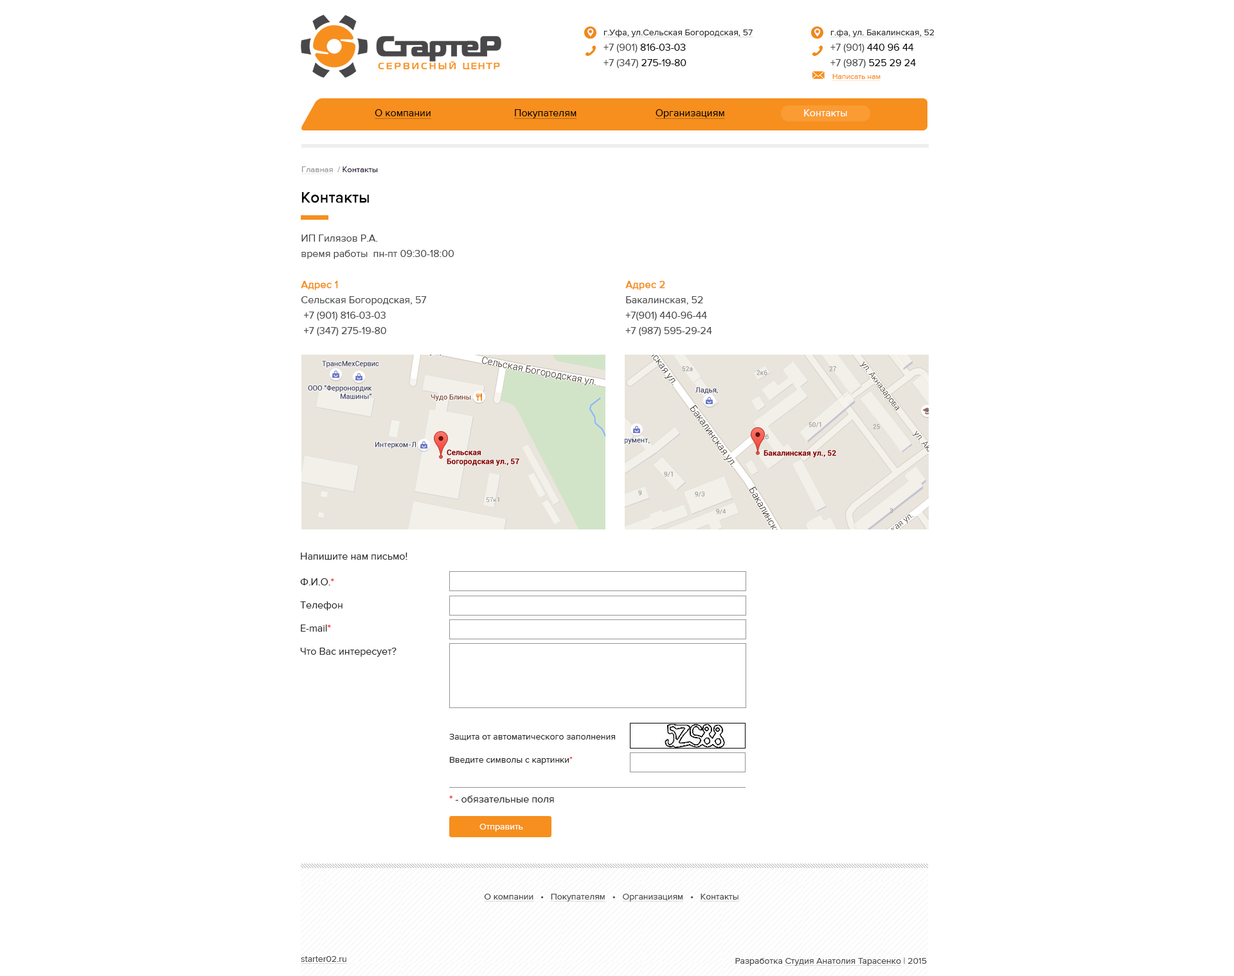
<style>
.page{position:relative;width:1234px;height:976px;background:#ffffff}
.page>*{position:absolute;margin:0}
.t1{font:9px/15.4px "amlgjlahnkgmkjoldgbpeifodofplkkf";color:#282828;text-decoration:underline}
.t2{font:10.3px/15.4px "amlgjlahnkgmkjoldgbpeifodofplkkf";color:#48484a}
.t3{font:10.3px/15.4px "amlgjlahnkgmkjoldgbpeifodofplkkf";color:#000000}
.t4{font:7.7px "amlgjlahnkgmkjoldgbpeifodofplkkf";color:#f68f1e;text-decoration:underline}
.t5{font:10.3px "amlgjlahnkgmkjoldgbpeifodofplkkf";color:#000000;text-decoration:underline}
.t6{font:10.3px "amlgjlahnkgmkjoldgbpeifodofplkkf";color:#ffffff}
.t7{font:8.4px "amlgjlahnkgmkjoldgbpeifodofplkkf";color:#2c1a37}
.t8{font:8.4px "amlgjlahnkgmkjoldgbpeifodofplkkf";color:#969696;text-decoration:underline}
.t9{font:8.4px "amlgjlahnkgmkjoldgbpeifodofplkkf";color:#969696}
.t10{font:15.4px "amlgjlahnkgmkjoldgbpeifodofplkkf";color:#010101;font-weight:bold}
.t11{font:10.3px/15.4px "amlgjlahnkgmkjoldgbpeifodofplkkf";color:#f68f1e;font-weight:bold}
.t12{font:10.3px "amlgjlahnkgmkjoldgbpeifodofplkkf";color:#282828}
.t13{font:10.3px/23.1px "amlgjlahnkgmkjoldgbpeifodofplkkf";color:#282828}
.t14{font:10.3px/23.1px "amlgjlahnkgmkjoldgbpeifodofplkkf";color:#ff0000}
.t15{font:9px/23.1px "amlgjlahnkgmkjoldgbpeifodofplkkf";color:#282828}
.t16{font:9px/23.1px "amlgjlahnkgmkjoldgbpeifodofplkkf";color:#fe0000}
.t17{font:10.3px "amlgjlahnkgmkjoldgbpeifodofplkkf";color:#ff0000}
.t18{font:9px "amlgjlahnkgmkjoldgbpeifodofplkkf";color:#ffffff}
.t19{font:9px "amlgjlahnkgmkjoldgbpeifodofplkkf";color:#48484a;text-decoration:underline}
.t20{font:9px "amlgjlahnkgmkjoldgbpeifodofplkkf";color:#48484a}
</style>
<div class="page">
<p class="t1" style="left:604px;top:30px;width:149px;height:38px">г.Уфа, ул.Сельская Богородская, 57<br><span class="t2">+7 (901)</span><span class="t3"> 816-03-03<br></span><span class="t2">+7 (347)</span><span class="t3"> 275-19-80</span></p>
<p class="t1" style="left:830px;top:30px;width:105px;height:38px">г.фа, ул. Бакалинская, 52<br><span class="t2">+7 (901)</span><span class="t3"> 440 96 44<br></span><span class="t2">+7 (987)</span><span class="t3"> 525 29 24</span></p>
<p class="t4" style="left:832px;top:74px;width:49px;height:7px">Написать нам</p>
<p class="t5" style="left:374px;top:109px;width:57px;height:10px">О компании</p>
<p class="t5" style="left:514px;top:109px;width:333px;height:10px">Покупателям      Организациям      <span class="t6">Контакты</span></p>
<p class="t7" style="left:301px;top:166px;width:77px;height:8px"><span class="t8">Главная</span><span class="t9">  /</span> Контакты</p>
<p class="t10" style="left:301px;top:192px;width:68px;height:11px">Контакты</p>
<p class="t2" style="left:301px;top:235px;width:153px;height:101px">ИП Гилязов Р.А.<br>время работы  пн-пт 09:30-18:00<br><br><span class="t11">Адрес 1<br></span>Сельская Богородская, 57<br> +7 (901) 816-03-03<br> +7 (347) 275-19-80</p>
<p class="t2" style="left:625px;top:281px;width:87px;height:55px"><span class="t11">Адрес 2<br></span>Бакалинская, 52<br>+7(901) 440-96-44<br>+7 (987) 595-29-24</p>
<p class="t12" style="left:301px;top:553px;width:107px;height:7px">Напишите нам письмо!</p>
<p class="t13" style="left:300px;top:578px;width:97px;height:79px">Ф.И.О.<span class="t14">*<br></span>Телефон<br>E-mail<span class="t14">*<br></span>Что Вас интересует?</p>
<p class="t15" style="left:449px;top:734px;width:166px;height:31px">Защита от автоматического заполнения<br>Введите символы с картинки<span class="t16">*</span></p>
<p class="t12" style="left:449px;top:796px;width:105px;height:7px"><span class="t17">*</span> - обязательные поля</p>
<p class="t18" style="left:480px;top:824px;width:43px;height:8px">Отправить</p>
<p class="t19" style="left:484px;top:894px;width:255px;height:8px">О компании<span class="t20">   •   </span>Покупателям<span class="t20">   •   </span>Организациям<span class="t20">   •   </span>Контакты</p>
<p class="t19" style="left:301px;top:956px;width:46px;height:8px">starter02.ru</p>
<p class="t19" style="left:735px;top:958px;width:192px;height:8px"><span class="t20">Разработка </span>Студия Анатолия Тарасенко<span class="t20"> | 2015</span></p>
</div>
